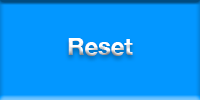
<style>
.page{position:relative;width:200px;height:100px;background:#0397ff}
.page>*{position:absolute;margin:0}
.t1{font:24px "HelveticaNeue-Bold"}
</style>
<div class="page">
<p class="t1" style="left:68px;top:38px;width:65px;height:18px">Reset</p>
</div>
